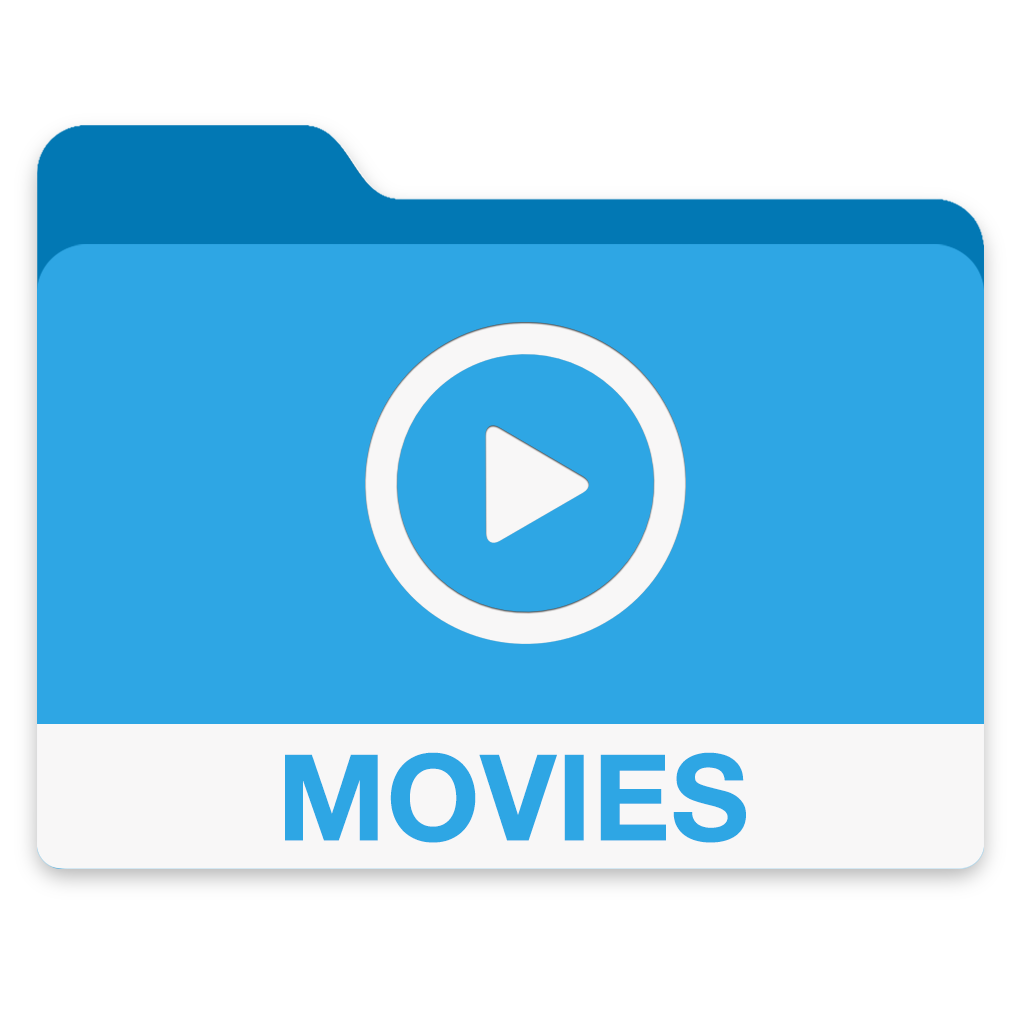
<style>
.page{position:relative;width:1024px;height:1024px;background:#2ea6e4}
.page>*{position:absolute;margin:0}
.t1{font:120px "HelveticaNeue-Bold";letter-spacing:0.005em;color:#2ea6e4}
</style>
<div class="page">
<p class="t1" style="left:285px;top:752px;width:461px;height:91px">MOVIES</p>
</div>
